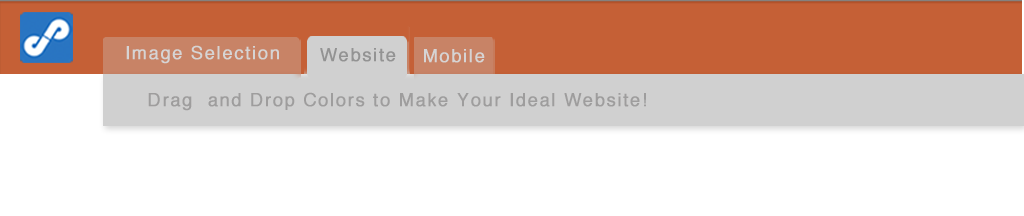
<style>
.page{position:relative;width:1024px;height:216px;background:#ffffff}
.page>*{position:absolute;margin:0}
.t1{font:18px "Helvetica";letter-spacing:0.075em;color:#d6d4d4;font-weight:bold}
.t2{font:18px "Helvetica";letter-spacing:0.075em;color:#939393;font-weight:bold}
.t3{font:18px "Helvetica";letter-spacing:0.075em;color:#9e9d9d;font-weight:bold}
</style>
<div class="page">
<p class="t1" style="left:126px;top:45px;width:153px;height:19px">Image Selection</p>
<p class="t2" style="left:320px;top:48px;width:76px;height:14px">Website</p>
<p class="t1" style="left:424px;top:49px;width:61px;height:14px">Mobile</p>
<p class="t3" style="left:148px;top:92px;width:498px;height:19px">Drag  and Drop Colors to Make Your Ideal Website!</p>
</div>
